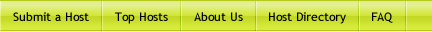
<style>
.page{position:relative;width:432px;height:32px}
.page>*{position:absolute;margin:0}
.t1{font:12px "TrebuchetMS";color:#000000}
</style>
<div class="page">
<p class="t1" style="left:13px;top:12px;width:76px;height:9px">Submit a Host</p>
<p class="t1" style="left:115px;top:12px;width:53px;height:12px">Top Hosts</p>
<p class="t1" style="left:194px;top:12px;width:49px;height:9px">About Us</p>
<p class="t1" style="left:269px;top:12px;width:77px;height:12px">Host Directory</p>
<p class="t1" style="left:372px;top:12px;width:21px;height:11px">FAQ</p>
</div>
